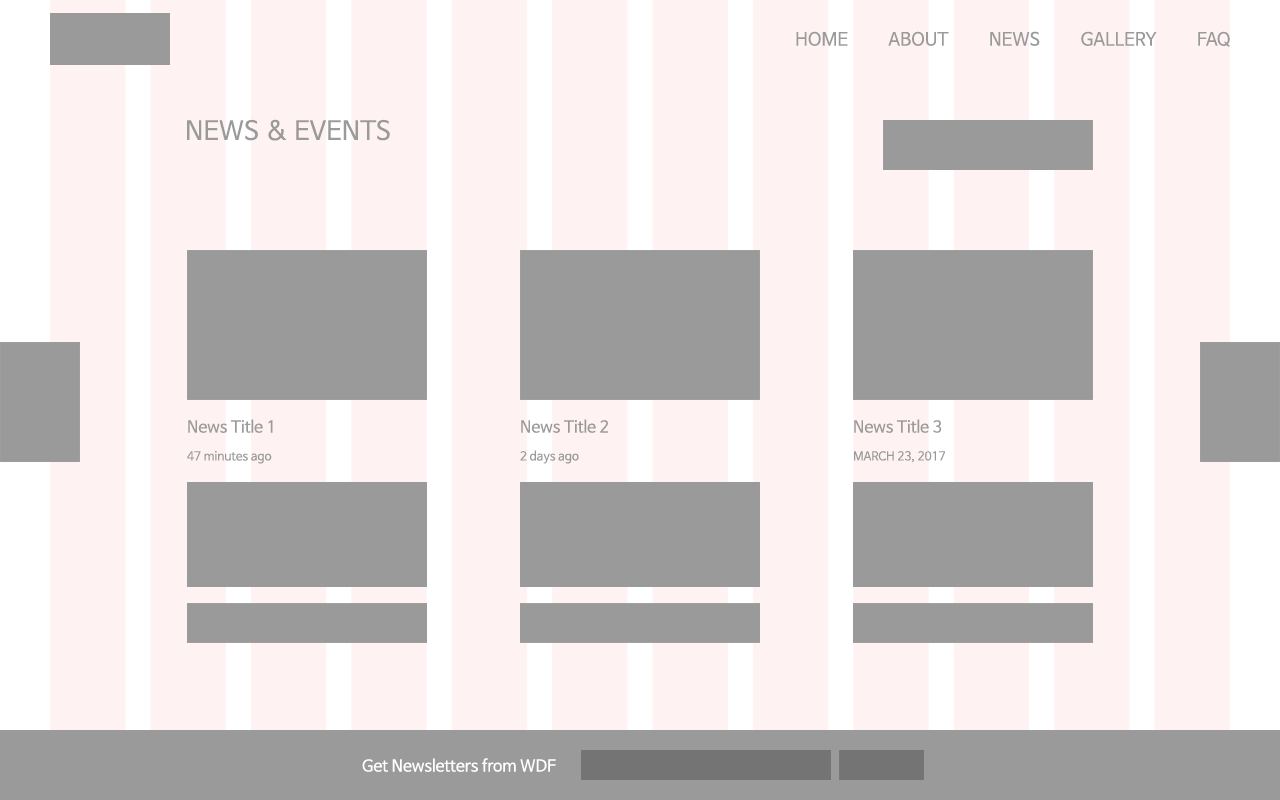
<style>
.page{position:relative;width:1280px;height:800px;background:#fff2f2}
.page>*{position:absolute;margin:0}
.t1{font:18px "NanumBarunGothic";color:#9a9a9a}
.t2{font:26px "NanumBarunGothic";color:#9a9a9a}
.t3{font:16px "NanumBarunGothic";color:#9a9a9a}
.t4{font:12px "NanumBarunGothic";color:#9a9a9a}
.t5{font:16px "NanumBarunGothic";color:#ffffff}
</style>
<div class="page">
<p class="t1" style="left:796px;top:31px;width:434px;height:16px">HOME          ABOUT          NEWS          GALLERY          FAQ</p>
<p class="t2" style="left:187px;top:119px;width:203px;height:22px">NEWS &amp; EVENTS</p>
<p class="t3" style="left:188px;top:419px;width:85px;height:14px">News Title 1</p>
<p class="t3" style="left:521px;top:419px;width:87px;height:14px">News Title 2</p>
<p class="t3" style="left:854px;top:419px;width:88px;height:14px">News Title 3</p>
<p class="t4" style="left:187px;top:451px;width:85px;height:13px">47 minutes ago</p>
<p class="t4" style="left:520px;top:450px;width:59px;height:14px">2 days ago</p>
<p class="t4" style="left:854px;top:451px;width:91px;height:12px">MARCH 23, 2017</p>
<p class="t5" style="left:362px;top:758px;width:194px;height:14px">Get Newsletters from WDF</p>
</div>
